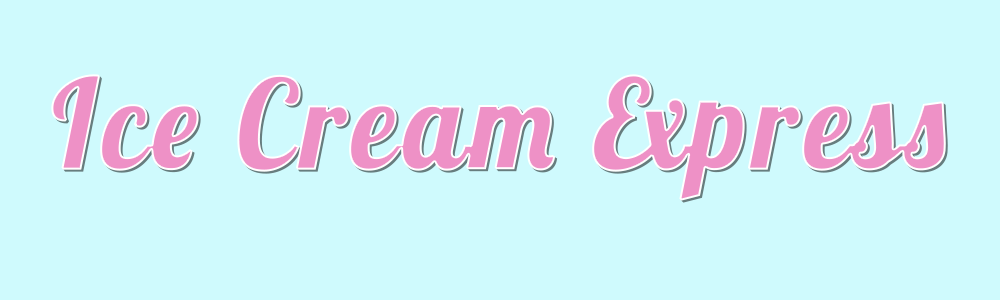
<style>
.page{position:relative;width:1000px;height:300px;background:#cffafd}
.page>*{position:absolute;margin:0}
.t1{font:122px "Lobster1.4";letter-spacing:0.035em;color:#ee91c6;font-weight:bold;scale:0.95 1}
</style>
<div class="page">
<p class="t1" style="left:51px;top:74px;width:895px;height:127px">Ice Cream Express</p>
</div>
